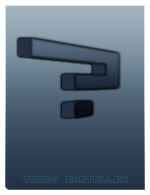
<style>
.page{position:relative;width:150px;height:195px}
.page>*{position:absolute;margin:0}
.t1{font:14px "VisitorTT2BRK";color:#233144}
</style>
<div class="page">
<p class="t1" style="left:24px;top:177px;width:103px;height:5px">TBDEV INsTALLER</p>
</div>
